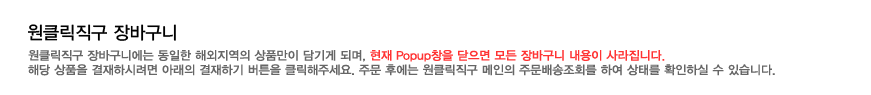
<style>
.page{position:relative;width:871px;height:95px;background:#ffffff}
.page>*{position:absolute;margin:0}
.t1{font:18px "YDIYGO330";color:#000000;scale:0.97 1}
.t2{font:12px "YDIYGO330";color:#666666}
.t3{font:12px "YDIYGO330";color:#ff3333}
</style>
<div class="page">
<p class="t1" style="left:28px;top:24px;width:148px;height:17px">원클릭직구 장바구니</p>
<p class="t2" style="left:28px;top:50px;width:747px;height:26px">원클릭직구 장바구니에는 동일한 해외지역의 상품만이 담기게 되며, <span class="t3">현재 Popup창을 닫으면 모든 장바구니 내용이 사라집니다.<br></span>해당 상품을 결재하시려면 아래의 결재하기 버튼을 클릭해주세요. 주문 후에는 원클릭직구 메인의 주문배송조회를 하여 상태를 확인하실 수 있습니다.</p>
</div>
